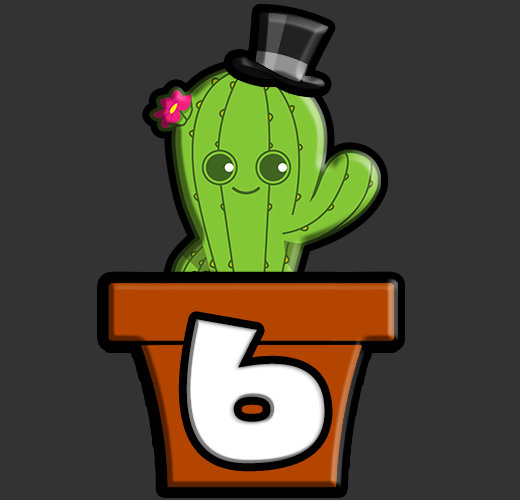
<style>
.page{position:relative;width:520px;height:500px;background:#333333}
.page>*{position:absolute;margin:0}
.t1{font:215.4px "Funhouse";color:#ffffff}
</style>
<div class="page">
<p class="t1" style="left:186px;top:319px;width:139px;height:145px">6</p>
</div>
